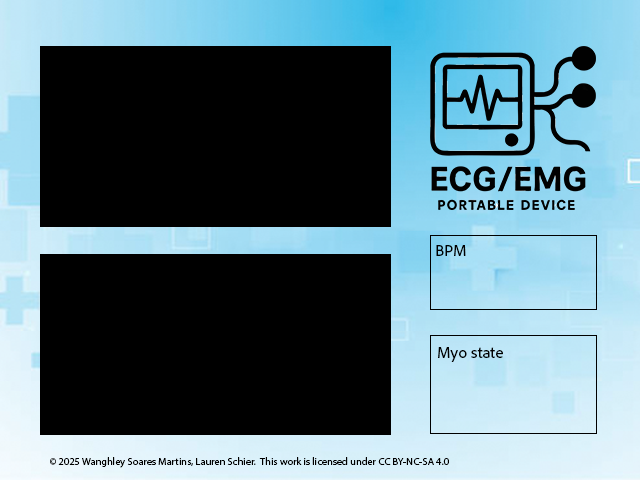
<style>
.page{position:relative;width:640px;height:480px;background:#000000}
.page>*{position:absolute;margin:0}
.t1{font:16.7px "AdobeClean-Regular";color:#000000}
.t2{font:10.4px "MyriadPro-Regular";color:#000000}
</style>
<div class="page">
<p class="t1" style="left:436px;top:245px;width:30px;height:11px">BPM</p>
<p class="t1" style="left:438px;top:347px;width:65px;height:15px">Myo state</p>
<p class="t2" style="left:50px;top:457px;width:399px;height:11px">© 2025 Wanghley Soares Martins, Lauren Schier.  This work is licensed under CC BY-NC-SA 4.0</p>
</div>
